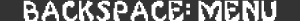
<style>
.page{position:relative;width:300px;height:21px;background:#333333}
.page>*{position:absolute;margin:0}
.t1{font:32px "MortalKombat2";color:#ffffff}
</style>
<div class="page">
<p class="t1" style="left:23px;top:0px;width:254px;height:21px">backspace: menu</p>
</div>
